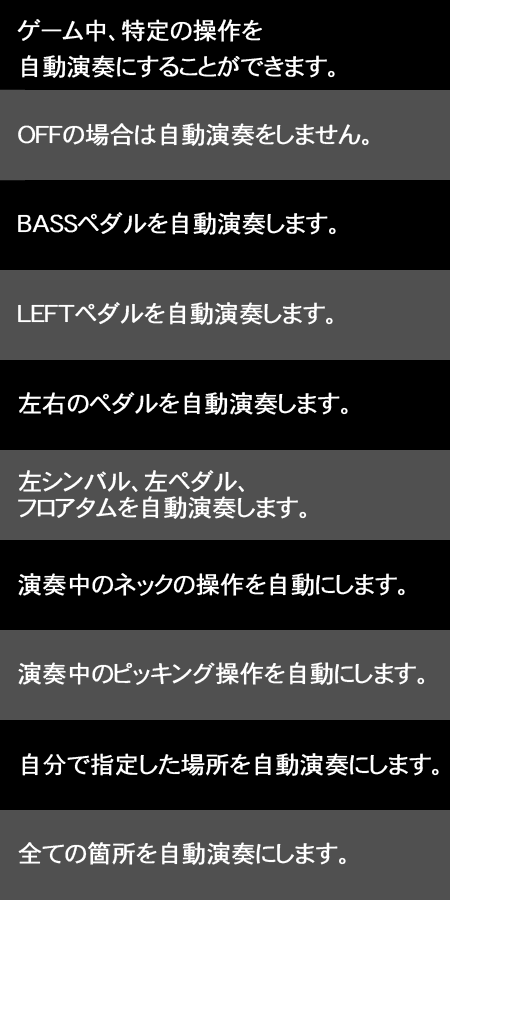
<style>
.page{position:relative;width:512px;height:1024px;background:#000000}
.page>*{position:absolute;margin:0}
.t1{font:24px/36px "DFHSGothic-W3-WING-RKSJ-H";color:#ffffff;font-weight:bold}
.t2{font:24px "DFHSGothic-W3-WING-RKSJ-H";color:#ffffff;font-weight:bold}
.t3{font:24px/26px "DFHSGothic-W3-WING-RKSJ-H";color:#ffffff;font-weight:bold}
</style>
<div class="page">
<p class="t1" style="left:17px;top:19px;width:318px;height:59px">ゲーム中、特定の操作を<br>自動演奏にすることができます。</p>
<p class="t2" style="left:18px;top:123px;width:351px;height:23px">OFFの場合は自動演奏をしません。</p>
<p class="t2" style="left:18px;top:212px;width:318px;height:23px">BASSペダルを自動演奏します。</p>
<p class="t2" style="left:18px;top:302px;width:315px;height:23px">LEFTペダルを自動演奏します。</p>
<p class="t2" style="left:18px;top:392px;width:330px;height:23px">左右のペダルを自動演奏します。</p>
<p class="t3" style="left:18px;top:470px;width:289px;height:49px">左シンバル、左ペダル、<br>フロアタムを自動演奏します。</p>
<p class="t2" style="left:18px;top:573px;width:387px;height:23px">演奏中のネックの操作を自動にします。</p>
<p class="t2" style="left:18px;top:662px;width:407px;height:23px">演奏中のピッキング操作を自動にします。</p>
<p class="t2" style="left:22px;top:753px;width:417px;height:23px">自分で指定した場所を自動演奏にします。</p>
<p class="t2" style="left:18px;top:841px;width:328px;height:24px">全ての箇所を自動演奏にします。</p>
</div>
